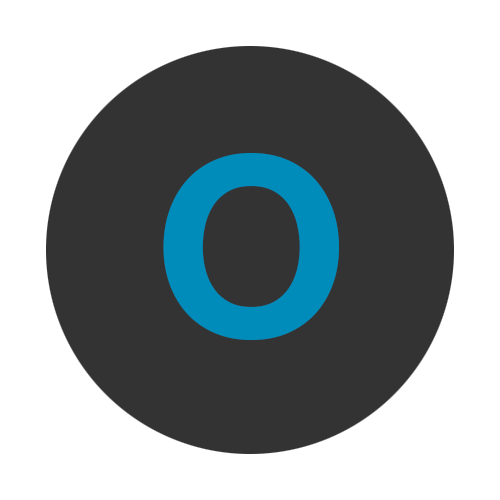
<style>
.page{position:relative;width:500px;height:500px;background:#ffffff}
.page>*{position:absolute;margin:0}
.t1{font:250px "HelveticaNeue-Bold";color:#008cba}
</style>
<div class="page">
<p class="t1" style="left:163px;top:153px;width:176px;height:187px">O</p>
</div>
